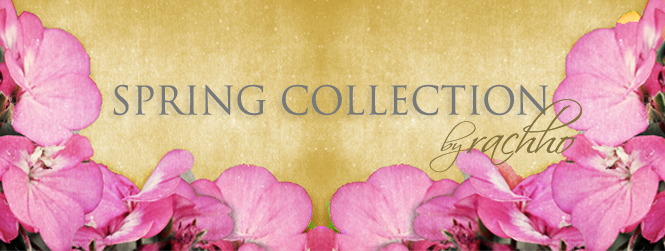
<style>
.page{position:relative;width:665px;height:251px}
.page>*{position:absolute;margin:0}
.t1{font:38.4px "TrajanPro-Regular";color:#78797b}
</style>
<div class="page">
<p class="t1" style="left:113px;top:84px;width:435px;height:32px">SPRING COLLECTION</p>
</div>
